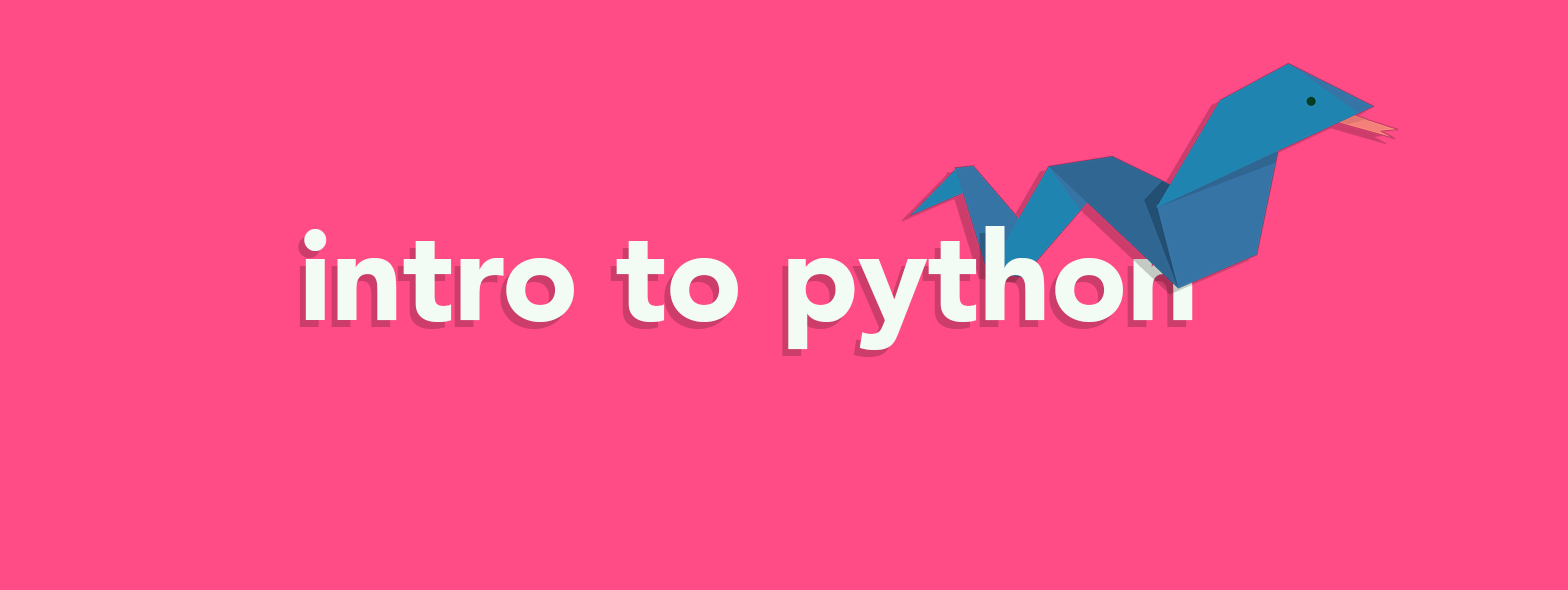
<style>
.page{position:relative;width:1568px;height:590px;background:#ff4c87}
.page>*{position:absolute;margin:0}
.t1{font:125px "Avenir-Black";color:#f2fcf4}
</style>
<div class="page">
<p class="t1" style="left:304px;top:226px;width:889px;height:124px">intro to python</p>
</div>
